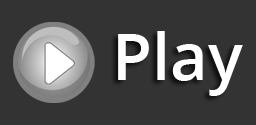
<style>
.page{position:relative;width:256px;height:125px;background:#333333}
.page>*{position:absolute;margin:0}
.t1{font:64.9px "OpenSans-Semibold";color:#ffffff}
</style>
<div class="page">
<p class="t1" style="left:118px;top:31px;width:125px;height:65px">Play</p>
</div>
